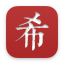
<style>
.page{position:relative;width:64px;height:64px}
.page>*{position:absolute;margin:0}
.t1{font:36px "TpldKhangXiDictDemo";color:#ffffff}
</style>
<div class="page">
<p class="t1" style="left:15px;top:12px;width:34px;height:39px">希</p>
</div>
